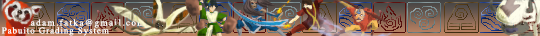
<style>
.page{position:relative;width:540px;height:36px}
.page>*{position:absolute;margin:0}
.t1{font:9px "Times-Roman";letter-spacing:0.101em;color:#ffffff}
.t2{font:9px "Times-Roman";letter-spacing:0.16em;color:#ffffff}
</style>
<div class="page">
<p class="t1" style="left:1px;top:27px;width:108px;height:9px">Pabuito Grading System</p>
<p class="t2" style="left:31px;top:19px;width:114px;height:9px">adam.fatka@gmail.com</p>
</div>
